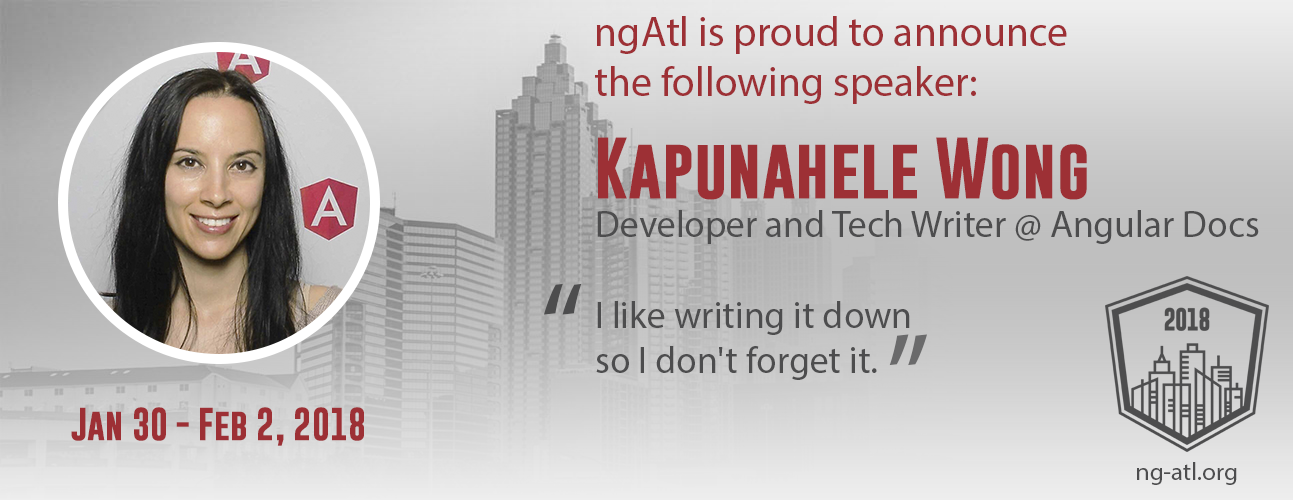
<style>
.page{position:relative;width:1293px;height:500px}
.page>*{position:absolute;margin:0}
.t1{font:41.7px "MyriadPro-Regular";color:#9d3035}
.t2{font:62.5px "GoboldBold";color:#9d3035}
.t3{font:37.5px "MyriadPro-Regular";color:#4d4d4e}
.t4{font:125px "MyriadPro-Regular";color:#4d4d4e}
.t5{font:125px "MyriadPro-Regular";color:#6a6a6b}
.t6{font:33.3px "GoboldBold";color:#9d3035}
.t7{font:25px "MyriadPro-Regular";color:#4d4d4e}
</style>
<div class="page">
<p class="t1" style="left:595px;top:16px;width:472px;height:88px">ngAtl is proud to announce the following speaker:</p>
<p class="t2" style="left:598px;top:137px;width:489px;height:63px">Kapunahele Wong</p>
<p class="t3" style="left:597px;top:210px;width:662px;height:34px">Developer and Tech Writer @ Angular Docs</p>
<p class="t4" style="left:544px;top:283px;width:38px;height:32px">“</p>
<p class="t3" style="left:596px;top:301px;width:314px;height:79px">I like writing it down so I don't forget it.</p>
<p class="t5" style="left:889px;top:334px;width:38px;height:32px;rotate:180deg">“</p>
<p class="t6" style="left:71px;top:407px;width:293px;height:39px">Jan 30 - Feb 2, 2018</p>
<p class="t7" style="left:1137px;top:462px;width:100px;height:23px">ng-atl.org</p>
</div>
